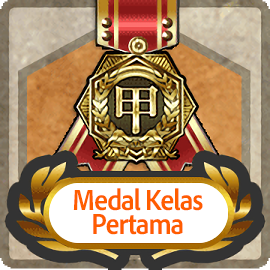
<style>
.page{position:relative;width:270px;height:270px}
.page>*{position:absolute;margin:0}
.t1{font:30px/24px "AdobeClean-Bold";letter-spacing:-0.04em;color:#ff5d00;scale:0.9 1}
</style>
<div class="page">
<p class="t1" style="left:73px;top:188px;width:130px;height:47px;text-align:center">Medal Kelas<br>Pertama</p>
</div>
